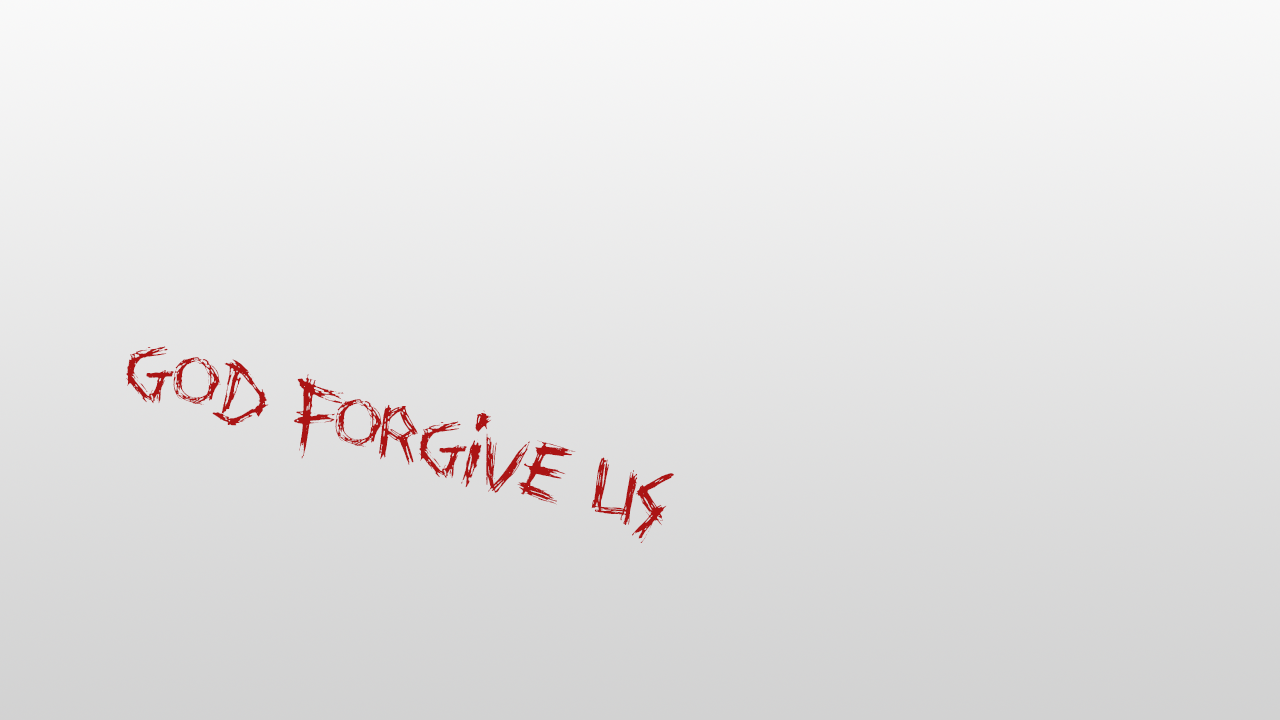
<style>
.page{position:relative;width:1280px;height:720px}
.page>*{position:absolute;margin:0}
.t1{font:72px "DrawingBlood";color:#ab1414}
</style>
<div class="page">
<p class="t1" style="left:125px;top:346px;width:549px;height:197px;rotate:14deg">God forgive us</p>
</div>
